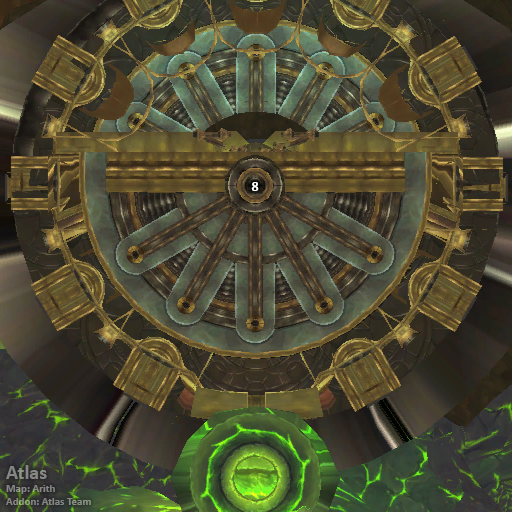
<style>
.page{position:relative;width:512px;height:512px}
.page>*{position:absolute;margin:0}
.t1{font:14px "Calibri-Bold";color:#ffffff}
.t2{font:11px "Calibri-Bold";color:#878786}
.t3{font:20px "Calibri-Bold";color:#878786}
</style>
<div class="page">
<p class="t1" style="left:251px;top:182px;width:8px;height:9px">8</p>
<p class="t2" style="left:6px;top:465px;width:85px;height:40px"><span class="t3">Atlas<br></span>Map: Arith<br>Addon: Atlas Team</p>
</div>
